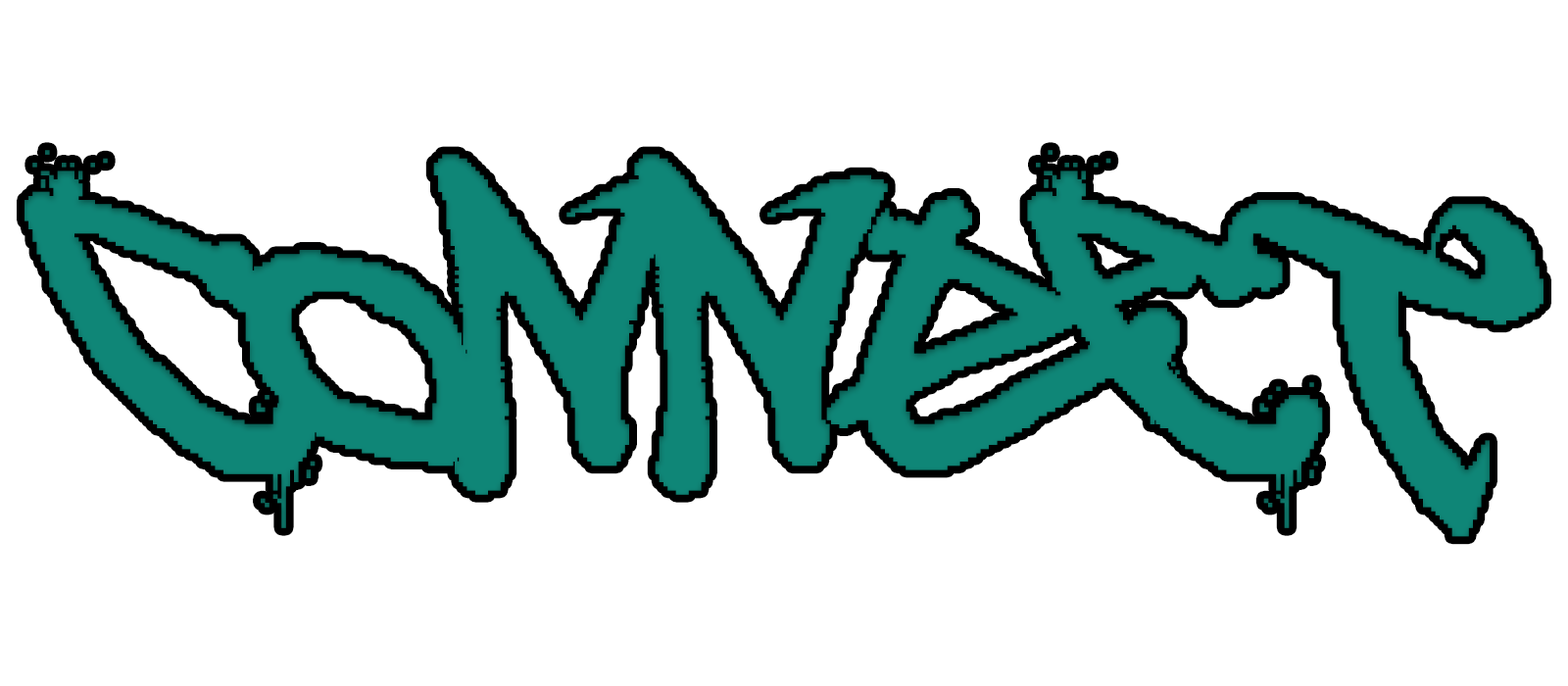
<style>
.page{position:relative;width:1568px;height:686px;background:#ffffff}
.page>*{position:absolute;margin:0}
.t1{font:530.8px "Digitag";color:#0f8677}
</style>
<div class="page">
<p class="t1" style="left:24px;top:150px;width:1520px;height:387px">Connect</p>
</div>
